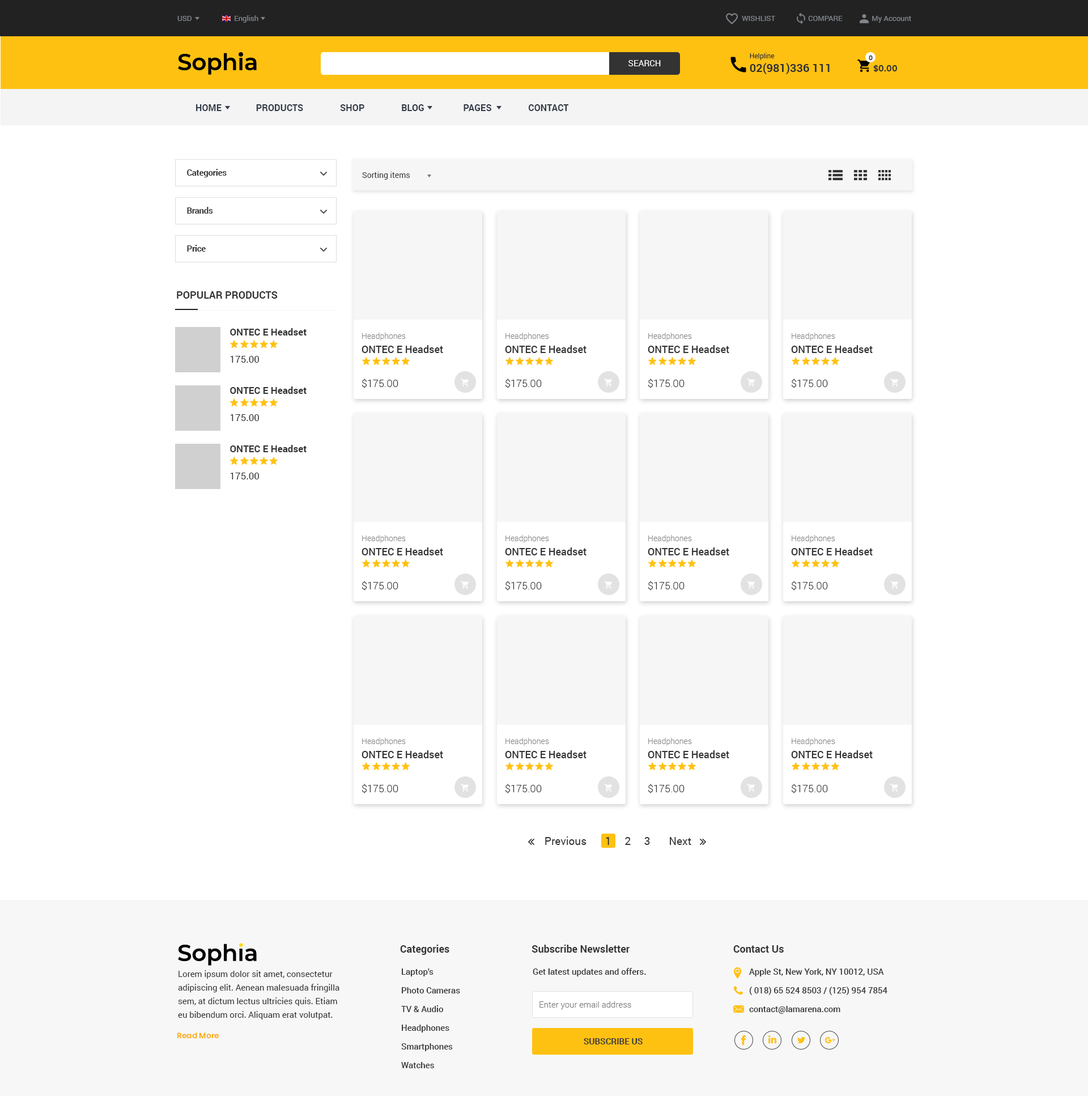
<style>
.page{position:relative;width:1088px;height:1096px;background:#ffffff}
.page>*{position:absolute;margin:0}
.t1{font:7.4px "Roboto-Regular";color:#81858c}
.t2{font:11.3px "Roboto-Bold";color:#333333}
.t3{font:6.8px "Roboto-Regular";color:#333333}
.t4{font:8.5px "Roboto-Regular";color:#ffffff}
.t5{font:6.2px "Poppins-SemiBold";color:#333333}
.t6{font:8.5px "Poppins-SemiBold";color:#333333}
.t7{font:9.1px "Roboto-Bold";color:#333c48}
.t8{font:8.2px "Roboto-Bold";color:#333333}
.t9{font:7.9px "Roboto-Regular";color:#333333}
.t10{font:10.2px "Roboto-Bold";color:#333333}
.t11{font:9.6px/15.3px "Roboto-Bold";color:#333333}
.t12{font:9.6px/27.2px "Roboto-Regular";color:#333333}
.t13{font:10.2px/14.2px "Roboto-Medium";color:#333333}
.t14{font:7.9px/14.2px "Roboto-Light";color:#848484}
.t15{font:10.2px/19.8px "Roboto-Light";color:#333333}
.t16{font:10.8px "Roboto-Regular";color:#333333}
.t17{font:8.5px/13.6px "Roboto-Regular";color:#333333}
.t18{font:8.5px/18.7px "Roboto-Medium";color:#333333}
.t19{font:8.5px "Roboto-Medium";color:#333333}
.t20{font:8.5px "Roboto-Light";color:#777777}
.t21{font:7.7px "Poppins-SemiBold";color:#fbad1a}
.t22{font:8.5px "Roboto-Bold";color:#383838}
</style>
<div class="page">
<p class="t1" style="left:177px;top:16px;width:15px;height:5px">USD</p>
<p class="t1" style="left:235px;top:15px;width:23px;height:8px">English</p>
<p class="t1" style="left:742px;top:16px;width:169px;height:7px">WISHLIST                  COMPARE                My Account</p>
<p class="t2" style="left:750px;top:53px;width:80px;height:21px"><span class="t3">Helpline<br></span>02(981)336 111</p>
<p class="t4" style="left:628px;top:60px;width:33px;height:6px">SEARCH</p>
<p class="t5" style="left:869px;top:55px;width:4px;height:6px">0</p>
<p class="t6" style="left:873px;top:65px;width:24px;height:8px">$0.00</p>
<p class="t7" style="left:196px;top:104px;width:373px;height:7px">HOME               PRODUCTS                SHOP                BLOG                 PAGES                CONTACT</p>
<p class="t8" style="left:187px;top:169px;width:40px;height:8px">Categories</p>
<p class="t9" style="left:362px;top:172px;width:48px;height:8px">Sorting items</p>
<p class="t8" style="left:187px;top:207px;width:26px;height:7px">Brands</p>
<p class="t8" style="left:187px;top:245px;width:19px;height:7px">Price</p>
<p class="t10" style="left:177px;top:291px;width:101px;height:8px">POPULAR PRODUCTS</p>
<p class="t11" style="left:230px;top:328px;width:77px;height:35px">ONTEC E Headset<br><span class="t12">175.00</span></p>
<p class="t13" style="left:362px;top:333px;width:81px;height:55px"><span class="t14">Headphones<br></span>ONTEC E Headset<br><br><span class="t15">$175.00</span></p>
<p class="t13" style="left:505px;top:333px;width:82px;height:55px"><span class="t14">Headphones<br></span>ONTEC E Headset<br><br><span class="t15">$175.00</span></p>
<p class="t13" style="left:648px;top:333px;width:81px;height:55px"><span class="t14">Headphones<br></span>ONTEC E Headset<br><br><span class="t15">$175.00</span></p>
<p class="t13" style="left:791px;top:333px;width:82px;height:55px"><span class="t14">Headphones<br></span>ONTEC E Headset<br><br><span class="t15">$175.00</span></p>
<p class="t11" style="left:230px;top:386px;width:77px;height:35px">ONTEC E Headset<br><span class="t12">175.00</span></p>
<p class="t11" style="left:230px;top:445px;width:77px;height:34px">ONTEC E Headset<br><span class="t12">175.00</span></p>
<p class="t13" style="left:362px;top:535px;width:81px;height:55px"><span class="t14">Headphones<br></span>ONTEC E Headset<br><br><span class="t15">$175.00</span></p>
<p class="t13" style="left:505px;top:535px;width:82px;height:55px"><span class="t14">Headphones<br></span>ONTEC E Headset<br><br><span class="t15">$175.00</span></p>
<p class="t13" style="left:648px;top:535px;width:81px;height:55px"><span class="t14">Headphones<br></span>ONTEC E Headset<br><br><span class="t15">$175.00</span></p>
<p class="t13" style="left:791px;top:535px;width:82px;height:55px"><span class="t14">Headphones<br></span>ONTEC E Headset<br><br><span class="t15">$175.00</span></p>
<p class="t13" style="left:362px;top:738px;width:81px;height:55px"><span class="t14">Headphones<br></span>ONTEC E Headset<br><br><span class="t15">$175.00</span></p>
<p class="t13" style="left:505px;top:738px;width:82px;height:55px"><span class="t14">Headphones<br></span>ONTEC E Headset<br><br><span class="t15">$175.00</span></p>
<p class="t13" style="left:648px;top:738px;width:81px;height:55px"><span class="t14">Headphones<br></span>ONTEC E Headset<br><br><span class="t15">$175.00</span></p>
<p class="t13" style="left:791px;top:738px;width:82px;height:55px"><span class="t14">Headphones<br></span>ONTEC E Headset<br><br><span class="t15">$175.00</span></p>
<p class="t16" style="left:545px;top:836px;width:146px;height:9px">Previous       1     2     3       Next</p>
<p class="t10" style="left:400px;top:945px;width:49px;height:10px">Categories</p>
<p class="t10" style="left:532px;top:945px;width:98px;height:8px">Subscribe Newsletter</p>
<p class="t10" style="left:733px;top:945px;width:51px;height:8px">Contact Us</p>
<p class="t17" style="left:178px;top:970px;width:161px;height:49px">Lorem ipsum dolor sit amet, consectetur adipiscing elit. Aenean malesuada fringilla sem, at dictum lectus ultricies quis. Etiam eu bibendum orci. Aliquam erat volutpat.</p>
<p class="t18" style="left:401px;top:968px;width:59px;height:100px">Laptop’s<br>Photo Cameras<br>TV &amp; Audio<br>Headphones<br>Smartphones<br>Watches</p>
<p class="t19" style="left:533px;top:968px;width:113px;height:8px">Get latest updates and offers.</p>
<p class="t18" style="left:749px;top:968px;width:138px;height:46px">Apple St, New York, NY 10012, USA<br>( 018) 65 524 8503 / (125) 954 7854<br>contact@lamarena.com</p>
<p class="t20" style="left:539px;top:1001px;width:92px;height:8px">Enter your email address</p>
<p class="t21" style="left:177px;top:1032px;width:42px;height:7px">Read More</p>
<p class="t22" style="left:584px;top:1038px;width:59px;height:6px">SUBSCRIBE US</p>
</div>
